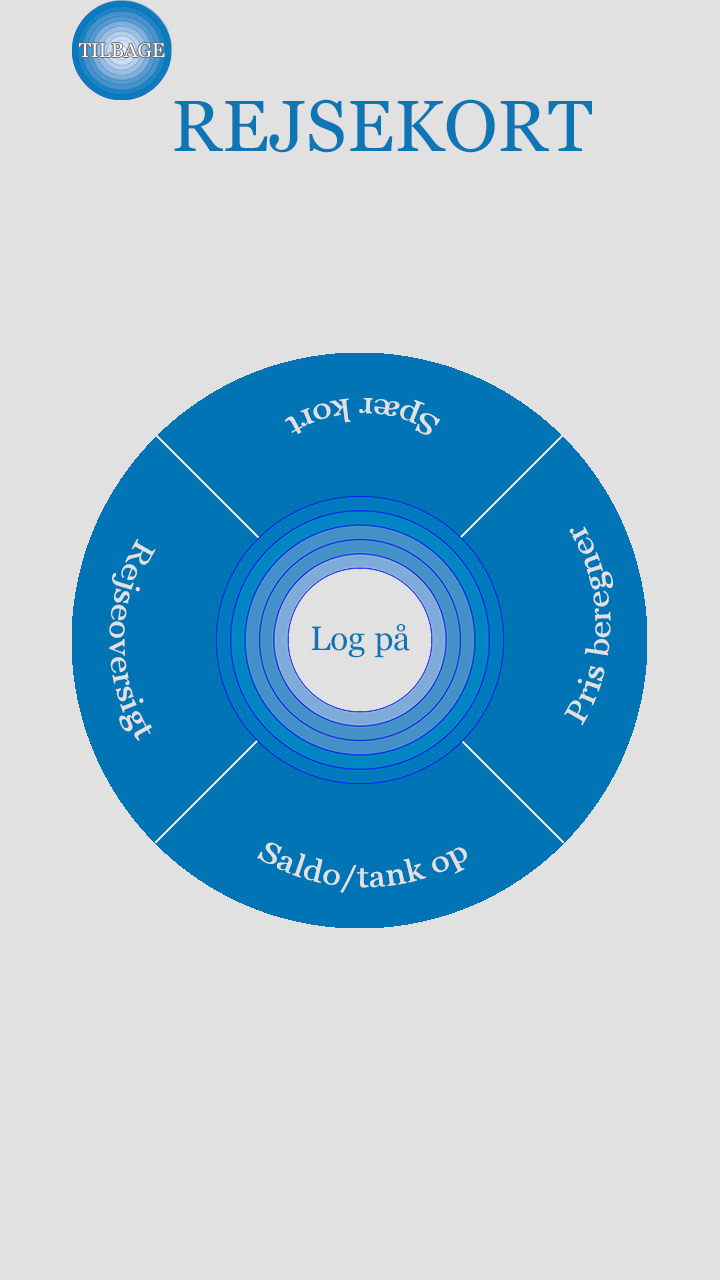
<style>
.page{position:relative;width:720px;height:1280px;background:#e1e1e1}
.page>*{position:absolute;margin:0}
.t1{font:72px "Georgia";color:#0f76b5}
.t2{font:30px "Georgia";color:#e1e1e1}
.t3{font:34px "Georgia";color:#0f76b5}
</style>
<div class="page">
<p class="t1" style="left:174px;top:99px;width:418px;height:54px">REJSEKORT</p>
<p class="t2" style="left:284px;top:398px;width:156px;height:37px;rotate:180deg">Spær kort</p>
<p class="t2" style="left:564px;top:526px;width:49px;height:200px;rotate:-90deg">Pris beregner</p>
<p class="t2" style="left:109px;top:538px;width:47px;height:203px;rotate:90deg">Rejseoversigt</p>
<p class="t3" style="left:311px;top:624px;width:99px;height:34px">Log på</p>
<p class="t2" style="left:257px;top:842px;width:210px;height:51px;text-align:center">Saldo/tank op</p>
</div>
